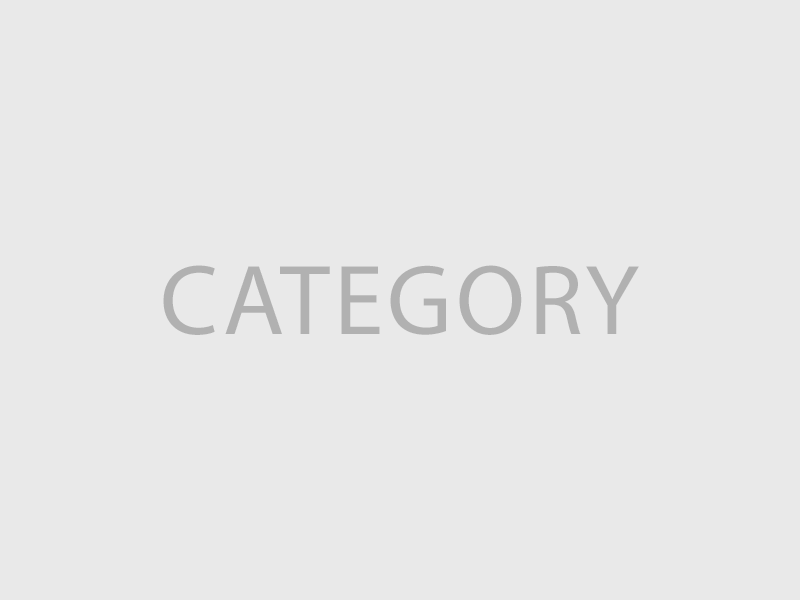
<style>
.page{position:relative;width:800px;height:600px;background:#e9e9e9}
.page>*{position:absolute;margin:0}
.t1{font:100px "MyriadPro-Regular";letter-spacing:0.04em;color:#b1b1b1;text-transform:uppercase}
</style>
<div class="page">
<p class="t1" style="left:163px;top:265px;width:476px;height:70px">Category</p>
</div>
